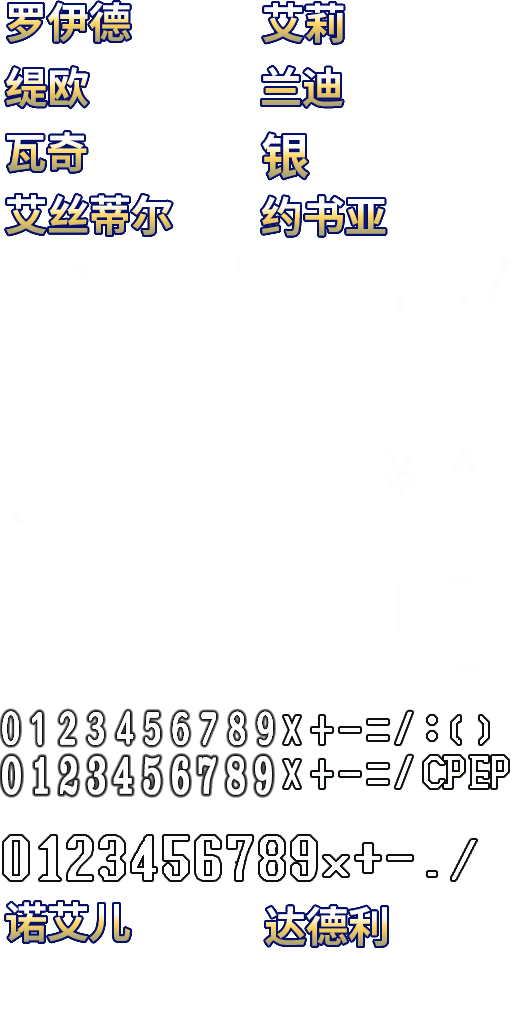
<style>
.page{position:relative;width:512px;height:1024px;background:#ffffff}
.page>*{position:absolute;margin:0}
.t1{font:42px "SourceHanSansSC-Bold"}
.t2{font:48px "SourceHanSansSC-Bold"}
</style>
<div class="page">
<p class="t1" style="left:7px;top:2px;width:123px;height:40px">罗伊德</p>
<p class="t1" style="left:263px;top:3px;width:81px;height:40px">艾莉</p>
<p class="t1" style="left:6px;top:67px;width:82px;height:40px">缇欧</p>
<p class="t1" style="left:262px;top:67px;width:81px;height:40px">兰迪</p>
<p class="t1" style="left:7px;top:132px;width:80px;height:40px">瓦奇</p>
<p class="t2" style="left:262px;top:133px;width:46px;height:46px">银</p>
<p class="t1" style="left:6px;top:195px;width:166px;height:40px">艾丝蒂尔</p>
<p class="t1" style="left:261px;top:196px;width:125px;height:40px">约书亚</p>
<p class="t1" style="left:6px;top:902px;width:124px;height:40px">诺艾儿</p>
<p class="t1" style="left:265px;top:906px;width:122px;height:40px">达德利</p>
</div>
